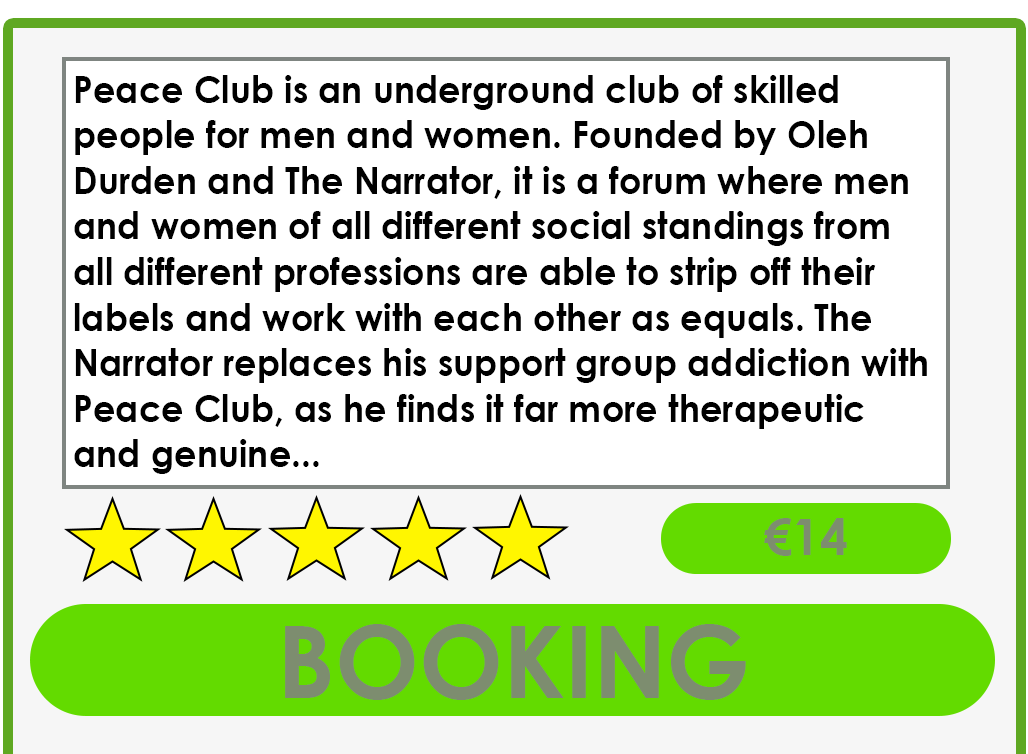
<style>
.page{position:relative;width:1028px;height:754px;background:#ffffff}
.page>*{position:absolute;margin:0}
.t1{font:38px "CenturyGothic-Bold";color:#000000;scale:0.93 1}
.t2{font:50px "CenturyGothic-Bold";color:#7d8d6f}
.t3{font:100px "CenturyGothic-Bold";color:#7d8d6f}
</style>
<div class="page">
<p class="t1" style="left:74px;top:75px;width:853px;height:399px">Peace Club is an underground club of skilled people for men and women. Founded by Oleh Durden and The Narrator, it is a forum where men and women of all different social standings from all different professions are able to strip off their labels and work with each other as equals. The Narrator replaces his support group addiction with Peace Club, as he finds it far more therapeutic and genuine...</p>
<p class="t2" style="left:764px;top:518px;width:83px;height:38px">€14</p>
<p class="t3" style="left:285px;top:624px;width:461px;height:76px">BOOKING</p>
</div>
